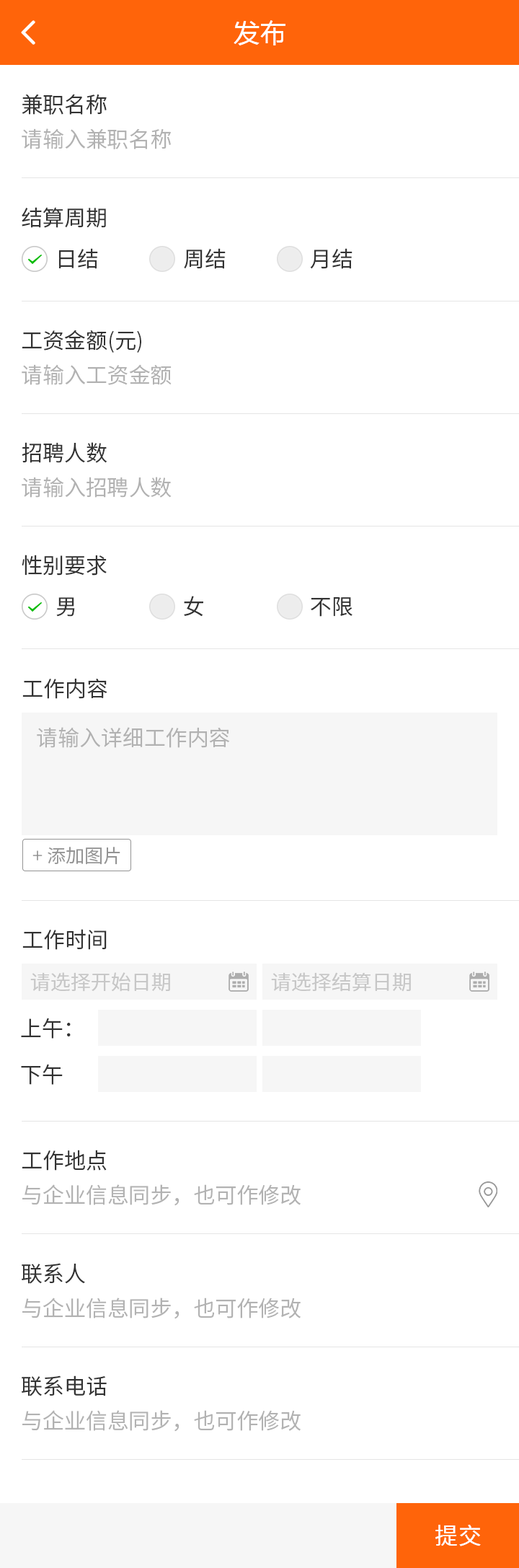
<style>
.page{position:relative;width:519px;height:1568px;background:#ffffff}
.page>*{position:absolute;margin:0}
.t1{font:26px "MicrosoftYaHei";letter-spacing:0.03em;color:#ffffff}
.t2{font:21.6px "NotoSansCJKsc-DemiLight";color:#333333}
.t3{font:21.6px "NotoSansCJKsc-DemiLight";color:#b2b2b2}
.t4{font:18.8px "NotoSansCJKsc-DemiLight";color:#949494}
.t5{font:20.2px "NotoSansCJKsc-DemiLight";color:#c7c7c7;font-variant:small-caps}
.t6{font:23.1px "NotoSansCJKsc-Regular";letter-spacing:0.03em;color:#ffffff;font-variant:small-caps}
</style>
<div class="page">
<p class="t1" style="left:234px;top:20px;width:52px;height:25px">发布</p>
<p class="t2" style="left:22px;top:94px;width:85px;height:21px">兼职名称</p>
<p class="t3" style="left:22px;top:128px;width:149px;height:21px">请输入兼职名称</p>
<p class="t2" style="left:22px;top:207px;width:84px;height:21px">结算周期</p>
<p class="t2" style="left:59px;top:248px;width:39px;height:21px">日结</p>
<p class="t2" style="left:184px;top:248px;width:42px;height:21px">周结</p>
<p class="t2" style="left:310px;top:248px;width:43px;height:21px">月结</p>
<p class="t2" style="left:22px;top:330px;width:119px;height:23px">工资金额(元)</p>
<p class="t3" style="left:22px;top:364px;width:150px;height:21px">请输入工资金额</p>
<p class="t2" style="left:22px;top:442px;width:85px;height:21px">招聘人数</p>
<p class="t3" style="left:22px;top:477px;width:150px;height:21px">请输入招聘人数</p>
<p class="t2" style="left:22px;top:555px;width:85px;height:21px">性别要求</p>
<p class="t2" style="left:56px;top:597px;width:19px;height:20px">男</p>
<p class="t2" style="left:184px;top:596px;width:19px;height:21px">女</p>
<p class="t2" style="left:311px;top:597px;width:42px;height:20px">不限</p>
<p class="t2" style="left:22px;top:678px;width:85px;height:21px">工作内容</p>
<p class="t3" style="left:37px;top:727px;width:193px;height:21px">请输入详细工作内容</p>
<p class="t4" style="left:32px;top:847px;width:88px;height:18px">+ 添加图片</p>
<p class="t2" style="left:22px;top:929px;width:85px;height:21px">工作时间</p>
<p class="t5" style="left:30px;top:972px;width:140px;height:20px">请选择开始日期</p>
<p class="t5" style="left:271px;top:972px;width:140px;height:20px">请选择结算日期</p>
<p class="t2" style="left:21px;top:1018px;width:50px;height:21px">上午：</p>
<p class="t2" style="left:21px;top:1064px;width:42px;height:21px">下午</p>
<p class="t2" style="left:22px;top:1150px;width:85px;height:21px">工作地点</p>
<p class="t3" style="left:22px;top:1184px;width:279px;height:22px">与企业信息同步，也可作修改</p>
<p class="t2" style="left:22px;top:1263px;width:63px;height:21px">联系人</p>
<p class="t3" style="left:22px;top:1298px;width:279px;height:21px">与企业信息同步，也可作修改</p>
<p class="t2" style="left:22px;top:1375px;width:85px;height:21px">联系电话</p>
<p class="t3" style="left:22px;top:1410px;width:279px;height:22px">与企业信息同步，也可作修改</p>
<p class="t6" style="left:436px;top:1525px;width:45px;height:21px">提交</p>
</div>
